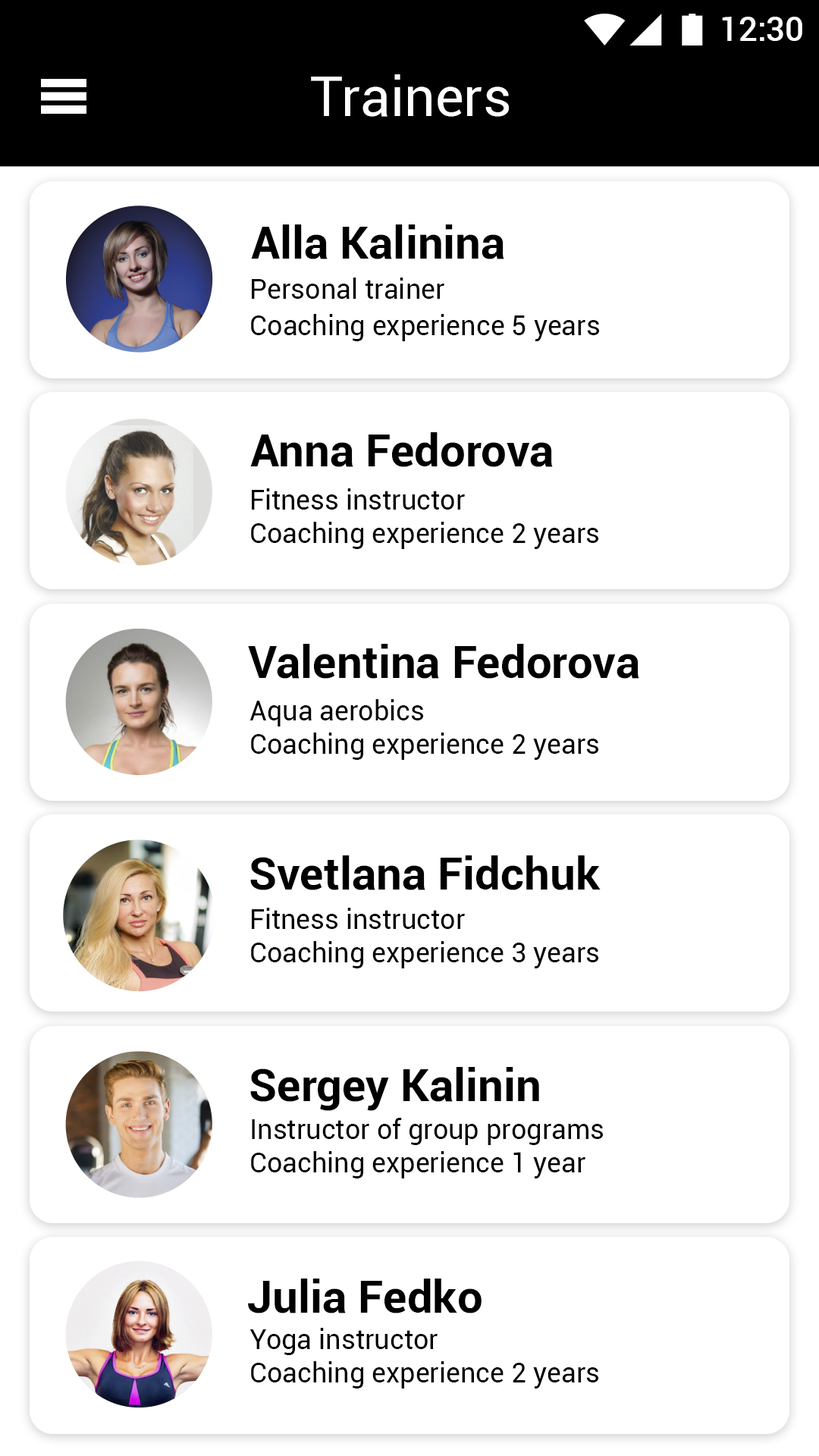
<style>
.page{position:relative;width:819px;height:1456px;background:#ffffff}
.page>*{position:absolute;margin:0}
.t1{font:33.4px "Roboto-Medium";color:#ffffff}
.t2{font:54.6px "Roboto-Regular";color:#ffffff}
.t3{font:45.5px "Roboto-Bold";color:#000000}
.t4{font:27.3px/36.4px "Roboto-Regular";color:#000000}
.t5{font:27.3px "Roboto-Regular";color:#000000}
</style>
<div class="page">
<p class="t1" style="left:722px;top:17px;width:80px;height:24px">12:30</p>
<p class="t2" style="left:311px;top:74px;width:198px;height:43px">Trainers</p>
<p class="t3" style="left:251px;top:224px;width:253px;height:35px">Alla Kalinina</p>
<p class="t4" style="left:251px;top:278px;width:348px;height:63px">Personal trainer<br>Coaching experience 5 years</p>
<p class="t3" style="left:250px;top:432px;width:303px;height:35px">Anna Fedorova</p>
<p class="t5" style="left:251px;top:488px;width:347px;height:61px">Fitness instructor<br>Coaching experience 2 years</p>
<p class="t3" style="left:248px;top:644px;width:391px;height:35px">Valentina Fedorova</p>
<p class="t5" style="left:249px;top:699px;width:349px;height:61px">Aqua aerobics<br>Coaching experience 2 years</p>
<p class="t3" style="left:250px;top:855px;width:351px;height:35px">Svetlana Fidchuk</p>
<p class="t5" style="left:251px;top:908px;width:347px;height:60px">Fitness instructor<br>Coaching experience 3 years</p>
<p class="t3" style="left:250px;top:1067px;width:289px;height:44px">Sergey Kalinin</p>
<p class="t5" style="left:251px;top:1118px;width:352px;height:60px">Instructor of group programs<br>Coaching experience 1 year</p>
<p class="t3" style="left:248px;top:1279px;width:234px;height:34px">Julia Fedko</p>
<p class="t5" style="left:249px;top:1328px;width:349px;height:60px">Yoga instructor<br>Coaching experience 2 years</p>
</div>
